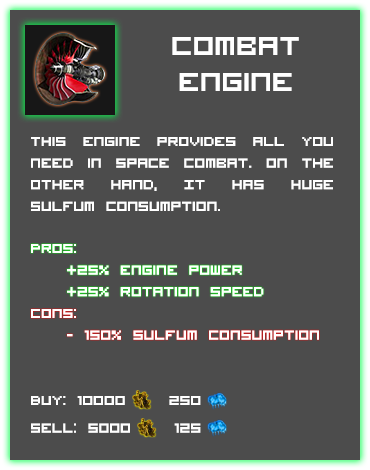
<style>
.page{position:relative;width:370px;height:470px;background:#4c4c4c}
.page>*{position:absolute;margin:0}
.t1{font:36px/12px "VisitorTT1BRK";color:#ffffff}
.t2{font:18px "VisitorTT1BRK";color:#ffffff}
</style>
<div class="page">
<p class="t1" style="left:172px;top:37px;width:127px;height:54px;text-align:center">Combat <br><br><br>Engine</p>
<p class="t2" style="left:31px;top:137px;width:302px;height:74px;text-align:justify">This engine provides all you need in space combat. On the other hand, It has huge sulfum consumption.</p>
<p class="t2" style="left:31px;top:244px;width:233px;height:53px;text-align:justify">Pros:<br> +25% engine power<br> +25% rotation speed</p>
<p class="t2" style="left:31px;top:309px;width:288px;height:31px;text-align:justify">Cons:<br> - 150% sulfum consumption</p>
<p class="t2" style="left:31px;top:396px;width:170px;height:37px">Buy: 10000    250    <br><br>Sell: 5000    125</p>
</div>
